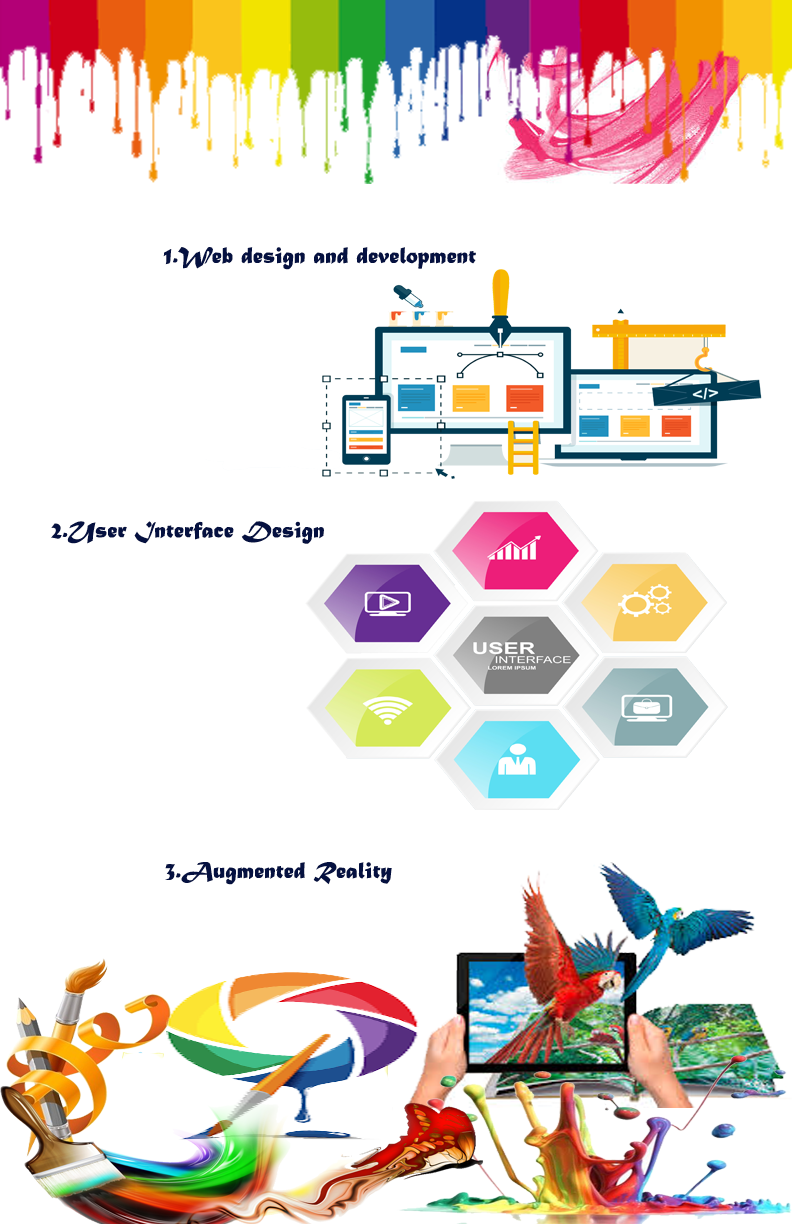
<style>
.page{position:relative;width:792px;height:1224px;background:#ffffff}
.page>*{position:absolute;margin:0}
.t1{font:24px "MaturaMTScriptCapitals";color:#051140}
</style>
<div class="page">
<p class="t1" style="left:163px;top:247px;width:313px;height:23px">1.Web design and development</p>
<p class="t1" style="left:51px;top:521px;width:273px;height:23px">2.User Interface Design</p>
<p class="t1" style="left:165px;top:862px;width:227px;height:23px">3.Augmented Reality</p>
</div>
